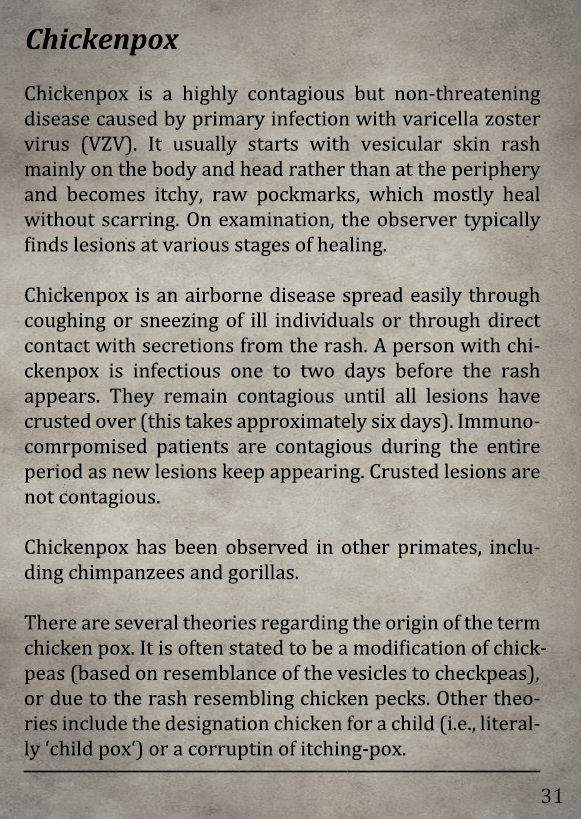
<style>
.page{position:relative;width:581px;height:819px}
.page>*{position:absolute;margin:0}
.t1{font:30px "Cambria-BoldItalic";color:#000000}
.t2{font:21px "Cambria";color:#000000}
.t3{font:21px "Arimo";color:#000000;scale:0.66 1}
.t4{font:21.5px "Cambria";color:#000000}
</style>
<div class="page">
<p class="t1" style="left:26px;top:28px;width:153px;height:28px">Chickenpox</p>
<p class="t2" style="left:24px;top:85px;width:522px;height:675px;text-align:justify">Chickenpox is a highly contagious but non-threatening   disease caused by primary infection with varicella zoster virus (VZV). It usually starts with vesicular skin rash mainly on the body and head rather than at the periphery and becomes itchy, raw pockmarks, which mostly heal   without scarring. On examination, the observer typically finds lesions at various stages of healing.<br><br>Chickenpox is an airborne disease spread easily through coughing or sneezing of ill individuals or through direct contact with secretions from the rash. A person with chickenpox is infectious one to two days before the rash      appears. They remain contagious until all lesions have crusted over (this takes approximately six days). Immunocomrpomised patients are contagious during the entire period as new lesions keep appearing. Crusted lesions are not contagious.<br><br>Chickenpox has been observed in other primates, including chimpanzees and gorillas.<br><br>There are several theories regarding the origin of the term chicken pox. It is often stated to be a modification of chick-<br>peas (based on resemblance of the vesicles to checkpeas),<br>or due to the rash resembling chicken pecks. Other theories include the designation chicken for a child (i.e., literally ‘child pox‘) or a corruptin of itching-pox.</p>
<p class="t3" style="left:23px;top:770px;width:518px;height:3px">___________________________________________________________________</p>
<p class="t4" style="left:541px;top:788px;width:22px;height:16px">31</p>
</div>
